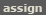
<style>
.page{position:relative;width:46px;height:15px;background:#5a5a5a}
.page>*{position:absolute;margin:0}
.t1{font:11px "Verdana-Bold";color:#dedbcb}
</style>
<div class="page">
<p class="t1" style="left:3px;top:4px;width:39px;height:10px">assign</p>
</div>
